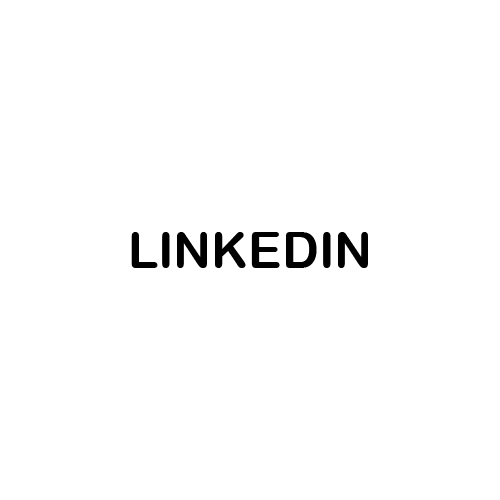
<style>
.page{position:relative;width:500px;height:500px;background:#ffffff}
.page>*{position:absolute;margin:0}
.t1{font:50px "ArialRoundedMTBold";color:#000000}
</style>
<div class="page">
<p class="t1" style="left:131px;top:232px;width:237px;height:36px">LINKEDIN</p>
</div>
